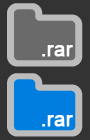
<style>
.page{position:relative;width:90px;height:140px;background:#333333}
.page>*{position:absolute;margin:0}
.t1{font:20px "ArialMT";color:#ffffff;font-weight:bold}
</style>
<div class="page">
<p class="t1" style="left:42px;top:45px;width:31px;height:12px">.rar</p>
<p class="t1" style="left:42px;top:115px;width:31px;height:12px">.rar</p>
</div>
